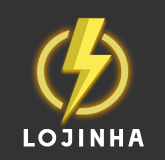
<style>
.page{position:relative;width:165px;height:160px;background:#333333}
.page>*{position:absolute;margin:0}
.t1{font:24px "LEIXO-DEMO";letter-spacing:0.1em;color:#ffffff;font-weight:bold}
</style>
<div class="page">
<p class="t1" style="left:23px;top:129px;width:121px;height:18px">Lojinha</p>
</div>
